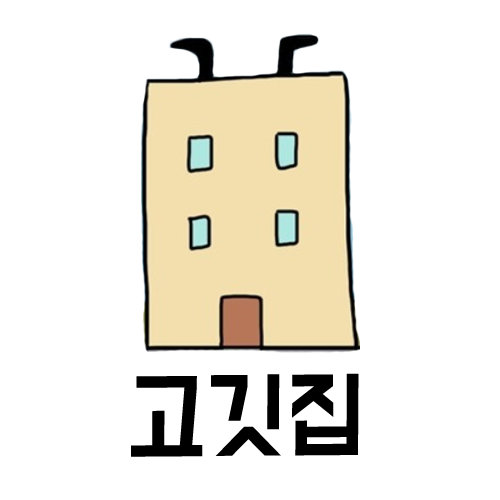
<style>
.page{position:relative;width:500px;height:500px;background:#ffffff}
.page>*{position:absolute;margin:0}
.t1{font:85.8px "BMDoHyeon";color:#000000;scale:0.96 1}
</style>
<div class="page">
<p class="t1" style="left:131px;top:373px;width:228px;height:84px">고깃집</p>
</div>
